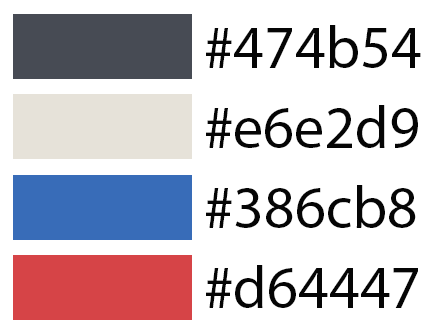
<style>
.page{position:relative;width:424px;height:335px;background:#ffffff}
.page>*{position:absolute;margin:0}
.t1{font:60px "MyriadPro-Regular";color:#050505}
</style>
<div class="page">
<p class="t1" style="left:206px;top:25px;width:215px;height:43px">#474b54</p>
<p class="t1" style="left:206px;top:105px;width:212px;height:43px">#e6e2d9</p>
<p class="t1" style="left:206px;top:185px;width:210px;height:43px">#386cb8</p>
<p class="t1" style="left:206px;top:265px;width:212px;height:43px">#d64447</p>
</div>
